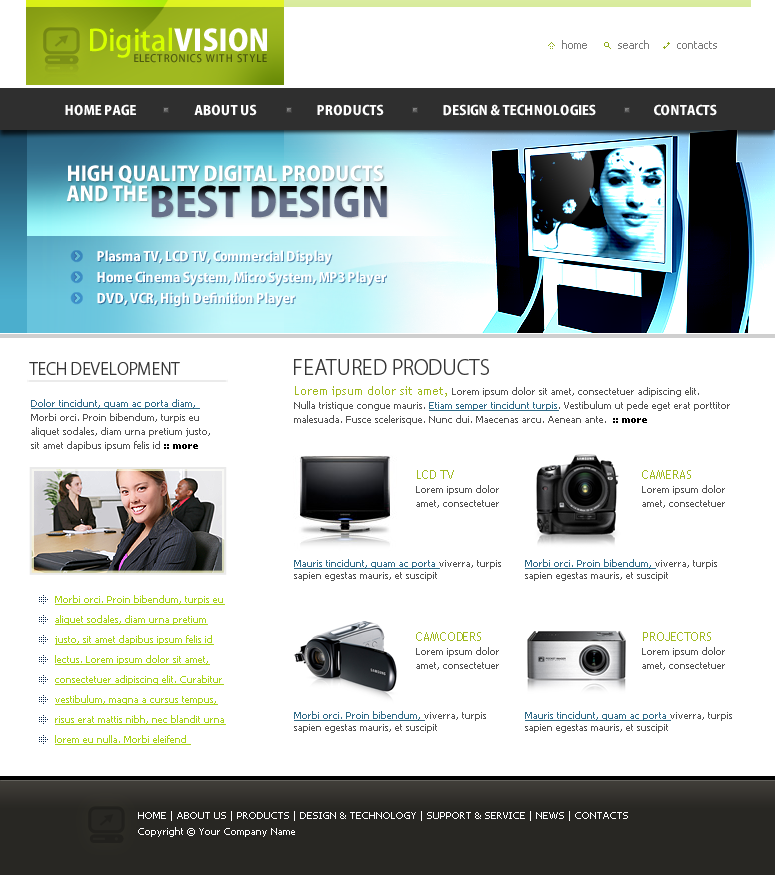
<style>
.page{position:relative;width:775px;height:875px;background:#ffffff}
.page>*{position:absolute;margin:0}
.t1{font:29px "KozGoPro-Medium";color:#d6ff00}
.t2{font:29px "KozGoPro-Heavy";color:#ffffff}
.t3{font:11px "Tahoma";color:#7b7b7b}
.t4{font:10px "KozGoPro-Medium";letter-spacing:0.08em;color:#4e5b0f}
.t5{font:13px "KozGoPro-Heavy";color:#ffffff}
.t6{font:20px "KozGoPro-Heavy";color:#ffffff}
.t7{font:40px "KozGoPro-Heavy"}
.t8{font:16px "KozGoPro-Light";color:#363636}
.t9{font:20px "KozGoPro-Light";color:#363636}
.t10{font:10px/14px "Tahoma";color:#535353}
.t11{font:12px/14px "TrebuchetMS";color:#a0b920}
.t12{font:10px/14px "Tahoma";color:#306b89;text-decoration:underline}
.t13{font:10px/14px "Tahoma-Bold";color:#000000}
.t14{font:10px/12px "Tahoma";color:#535353}
.t15{font:10px/12px "Tahoma";color:#306b89;text-decoration:underline}
.t16{font:10px/20px "Tahoma";color:#a8d217;text-decoration:underline}
.t17{font:10px/16px "Tahoma";color:#ffffff}
</style>
<div class="page">
<p class="t1" style="left:90px;top:27px;width:177px;height:31px">Digital<span class="t2">VISION</span></p>
<p class="t3" style="left:562px;top:40px;width:25px;height:9px">home</p>
<p class="t3" style="left:618px;top:40px;width:31px;height:9px">search</p>
<p class="t3" style="left:677px;top:41px;width:40px;height:8px">contacts</p>
<p class="t4" style="left:134px;top:54px;width:133px;height:9px">ELECTRONICS WITH STYLE</p>
<p class="t5" style="left:65px;top:104px;width:71px;height:12px">HOME PAGE</p>
<p class="t5" style="left:194px;top:104px;width:63px;height:12px">ABOUT US</p>
<p class="t5" style="left:317px;top:104px;width:67px;height:12px">PRODUCTS</p>
<p class="t5" style="left:443px;top:104px;width:153px;height:12px">DESIGN &amp; TECHNOLOGIES</p>
<p class="t5" style="left:654px;top:104px;width:63px;height:12px">CONTACTS</p>
<p class="t6" style="left:68px;top:165px;width:315px;height:19px">HIGH QUALITY DIGITAL PRODUCTS</p>
<p class="t6" style="left:66px;top:185px;width:82px;height:17px">AND THE</p>
<p class="t7" style="left:151px;top:185px;width:236px;height:33px">BEST DESIGN</p>
<p class="t5" style="left:97px;top:250px;width:235px;height:15px">Plasma TV, LCD TV, Commercial Display</p>
<p class="t5" style="left:97px;top:271px;width:289px;height:15px">Home Cinema System, Micro System, MP3 Player</p>
<p class="t5" style="left:97px;top:292px;width:198px;height:15px">DVD, VCR, High Definition Player</p>
<p class="t8" style="left:29px;top:362px;width:151px;height:13px">TECH DEVELOPMENT</p>
<p class="t9" style="left:294px;top:359px;width:195px;height:16px">FEATURED PRODUCTS</p>
<p class="t10" style="left:294px;top:386px;width:436px;height:39px"><span class="t11">Lorem ipsum dolor sit amet, </span>Lorem ipsum dolor sit amet, consectetuer adipiscing elit. <br>Nulla tristique congue mauris. <span class="t12">Etiam semper tincidunt turpis</span>. Vestibulum ut pede eget erat porttitor malesuada. Fusce scelerisque. Nunc dui. Maecenas arcu. Aenean ante.  <span class="t13">:: more</span></p>
<p class="t10" style="left:31px;top:399px;width:179px;height:52px"><span class="t12">Dolor tincidunt, quam ac porta diam, <br></span>Morbi orci. Proin bibendum, turpis eu aliquet sodales, diam urna pretium justo, sit amet dapibus ipsum felis id <span class="t13">:: more</span></p>
<p class="t10" style="left:416px;top:470px;width:83px;height:38px"><span class="t11">LCD TV<br></span>Lorem ipsum dolor amet, consectetuer</p>
<p class="t10" style="left:642px;top:470px;width:83px;height:38px"><span class="t11">CAMERAS<br></span>Lorem ipsum dolor amet, consectetuer</p>
<p class="t14" style="left:294px;top:559px;width:207px;height:22px"><span class="t15">Mauris tincidunt, quam ac porta </span>viverra, turpis sapien egestas mauris, et suscipit</p>
<p class="t14" style="left:525px;top:559px;width:192px;height:22px"><span class="t15">Morbi orci. Proin bibendum, </span>viverra, turpis sapien egestas mauris, et suscipit</p>
<p class="t16" style="left:55px;top:595px;width:171px;height:150px">Morbi orci. Proin bibendum, turpis eu aliquet sodales, diam urna pretium justo, sit amet dapibus ipsum felis id lectus. Lorem ipsum dolor sit amet, consectetuer adipiscing elit. Curabitur vestibulum, magna a cursus tempus, risus erat mattis nibh, nec blandit urna lorem eu nulla. Morbi eleifend</p>
<p class="t10" style="left:416px;top:632px;width:83px;height:38px"><span class="t11">CAMCODERS<br></span>Lorem ipsum dolor amet, consectetuer</p>
<p class="t10" style="left:642px;top:632px;width:83px;height:38px"><span class="t11">PROJECTORS<br></span>Lorem ipsum dolor amet, consectetuer</p>
<p class="t14" style="left:294px;top:711px;width:192px;height:22px"><span class="t15">Morbi orci. Proin bibendum, </span>viverra, turpis sapien egestas mauris, et suscipit</p>
<p class="t14" style="left:525px;top:711px;width:207px;height:22px"><span class="t15">Mauris tincidunt, quam ac porta </span>viverra, turpis sapien egestas mauris, et suscipit</p>
<p class="t17" style="left:138px;top:811px;width:490px;height:26px">HOME | ABOUT US | PRODUCTS | DESIGN &amp; TECHNOLOGY | SUPPORT &amp; SERVICE | NEWS | CONTACTS<br>Copyright © Your Company Name</p>
</div>
